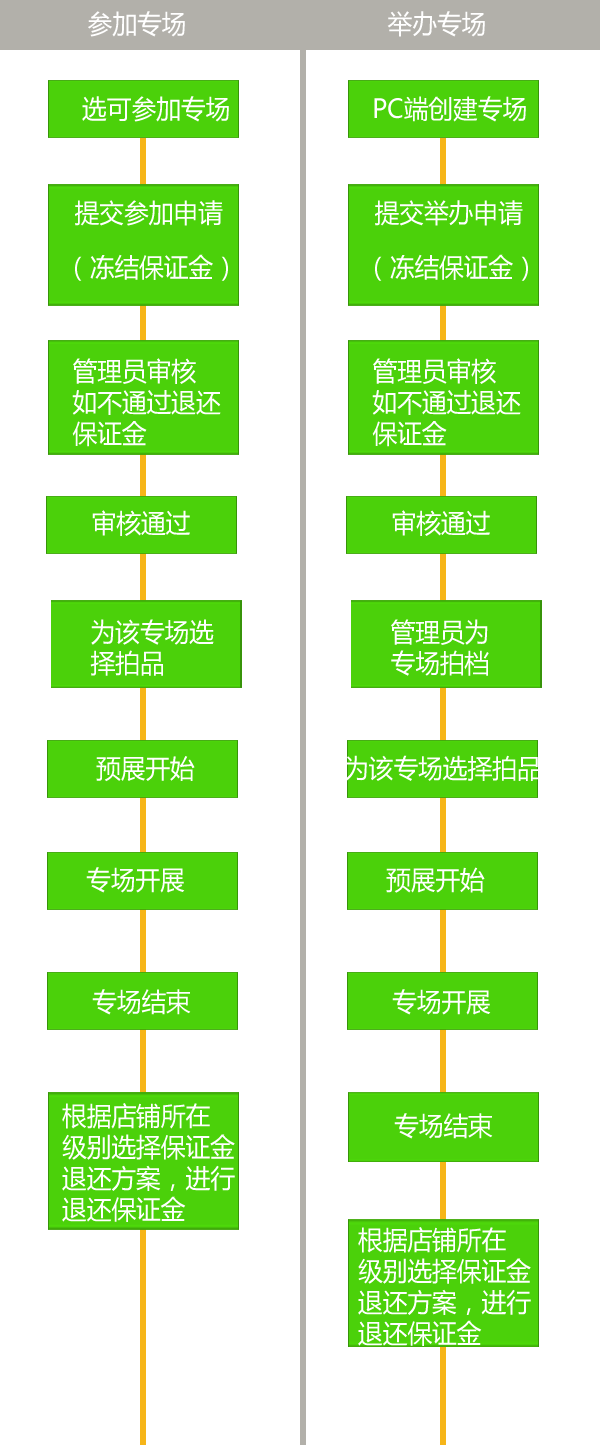
<style>
.page{position:relative;width:600px;height:1445px;background:#ffffff}
.page>*{position:absolute;margin:0}
.t1{font:26px "MicrosoftYaHei";color:#ffffff;scale:0.95 1}
</style>
<div class="page">
<p class="t1" style="left:88px;top:11px;width:97px;height:26px">参加专场</p>
<p class="t1" style="left:387px;top:11px;width:98px;height:26px">举办专场</p>
<p class="t1" style="left:82px;top:96px;width:147px;height:26px">选可参加专场</p>
<p class="t1" style="left:374px;top:96px;width:152px;height:26px">PC端创建专场</p>
<p class="t1" style="left:75px;top:200px;width:148px;height:26px">提交参加申请</p>
<p class="t1" style="left:375px;top:200px;width:148px;height:26px">提交举办申请</p>
<p class="t1" style="left:75px;top:254px;width:153px;height:27px">（冻结保证金）</p>
<p class="t1" style="left:375px;top:254px;width:153px;height:27px">（冻结保证金）</p>
<p class="t1" style="left:72px;top:358px;width:149px;height:89px">管理员审核<br>如不通过退还<br>保证金</p>
<p class="t1" style="left:372px;top:358px;width:149px;height:89px">管理员审核<br>如不通过退还<br>保证金</p>
<p class="t1" style="left:92px;top:510px;width:98px;height:26px">审核通过</p>
<p class="t1" style="left:392px;top:510px;width:98px;height:26px">审核通过</p>
<p class="t1" style="left:90px;top:619px;width:124px;height:57px">为该专场选<br>择拍品</p>
<p class="t1" style="left:391px;top:619px;width:98px;height:57px">管理员为<br>专场拍档</p>
<p class="t1" style="left:96px;top:756px;width:99px;height:26px">预展开始</p>
<p class="t1" style="left:344px;top:755px;width:196px;height:26px">为该专场选择拍品</p>
<p class="t1" style="left:86px;top:867px;width:99px;height:26px">专场开展</p>
<p class="t1" style="left:386px;top:867px;width:99px;height:26px">预展开始</p>
<p class="t1" style="left:92px;top:989px;width:99px;height:26px">专场结束</p>
<p class="t1" style="left:392px;top:989px;width:99px;height:26px">专场开展</p>
<p class="t1" style="left:62px;top:1103px;width:173px;height:119px">根据店铺所在<br>级别选择保证金<br>退还方案，进行<br>退还保证金</p>
<p class="t1" style="left:394px;top:1113px;width:99px;height:26px">专场结束</p>
<p class="t1" style="left:358px;top:1227px;width:173px;height:119px">根据店铺所在<br>级别选择保证金<br>退还方案，进行<br>退还保证金</p>
</div>
